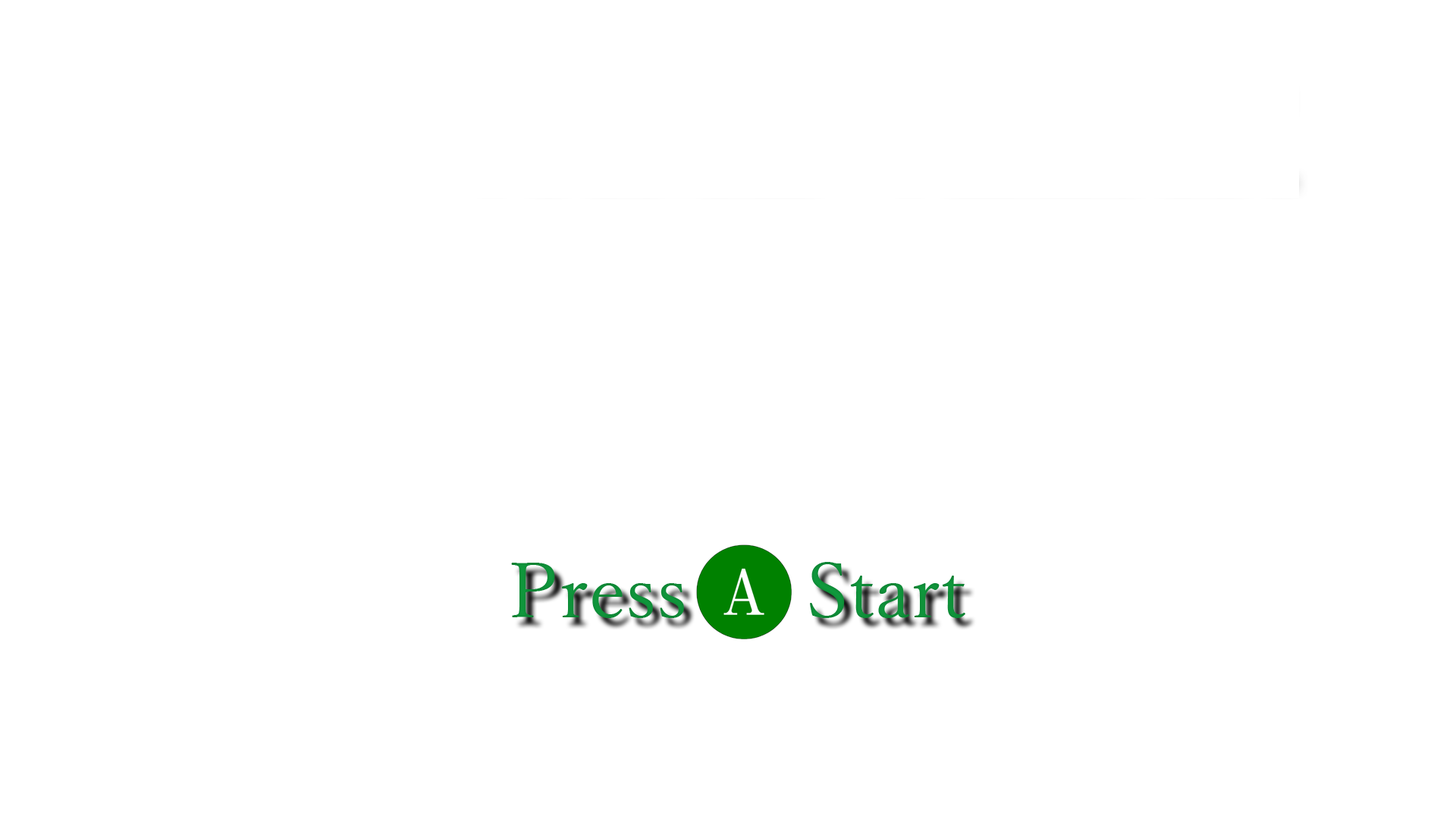
<style>
.page{position:relative;width:1456px;height:819px;background:#ffffff}
.page>*{position:absolute;margin:0}
.t1{font:75.8px "YuMincho-Regular";color:#109d3e}
</style>
<div class="page">
<p class="t1" style="left:511px;top:562px;width:454px;height:56px">Press      Start</p>
</div>
